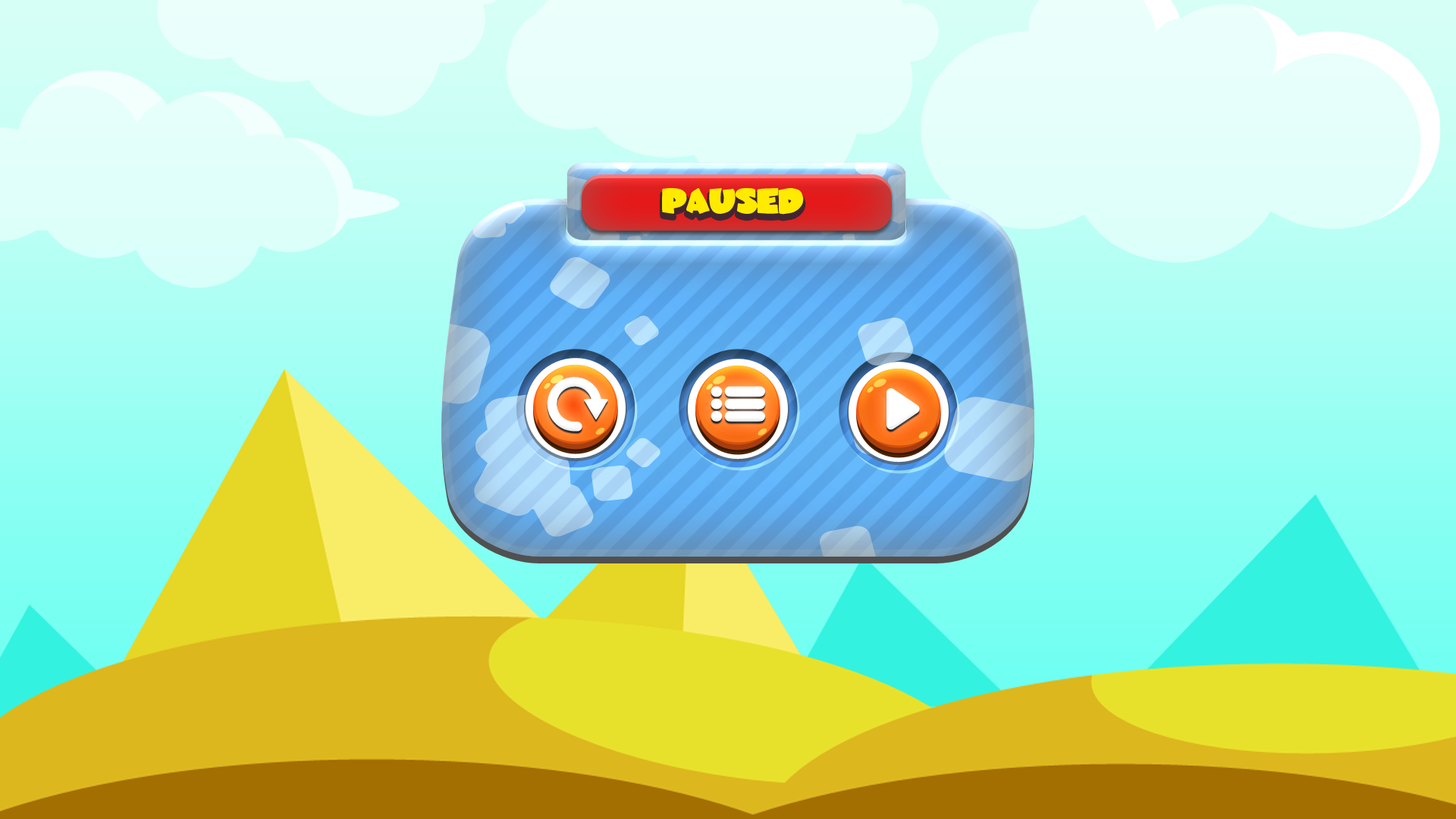
<style>
.page{position:relative;width:1456px;height:819px}
.page>*{position:absolute;margin:0}
.t1{font:25.8px "JuneBug";letter-spacing:-0.02em;color:#ffea00}
</style>
<div class="page">
<p class="t1" style="left:662px;top:188px;width:142px;height:27px">PAUSED</p>
</div>
